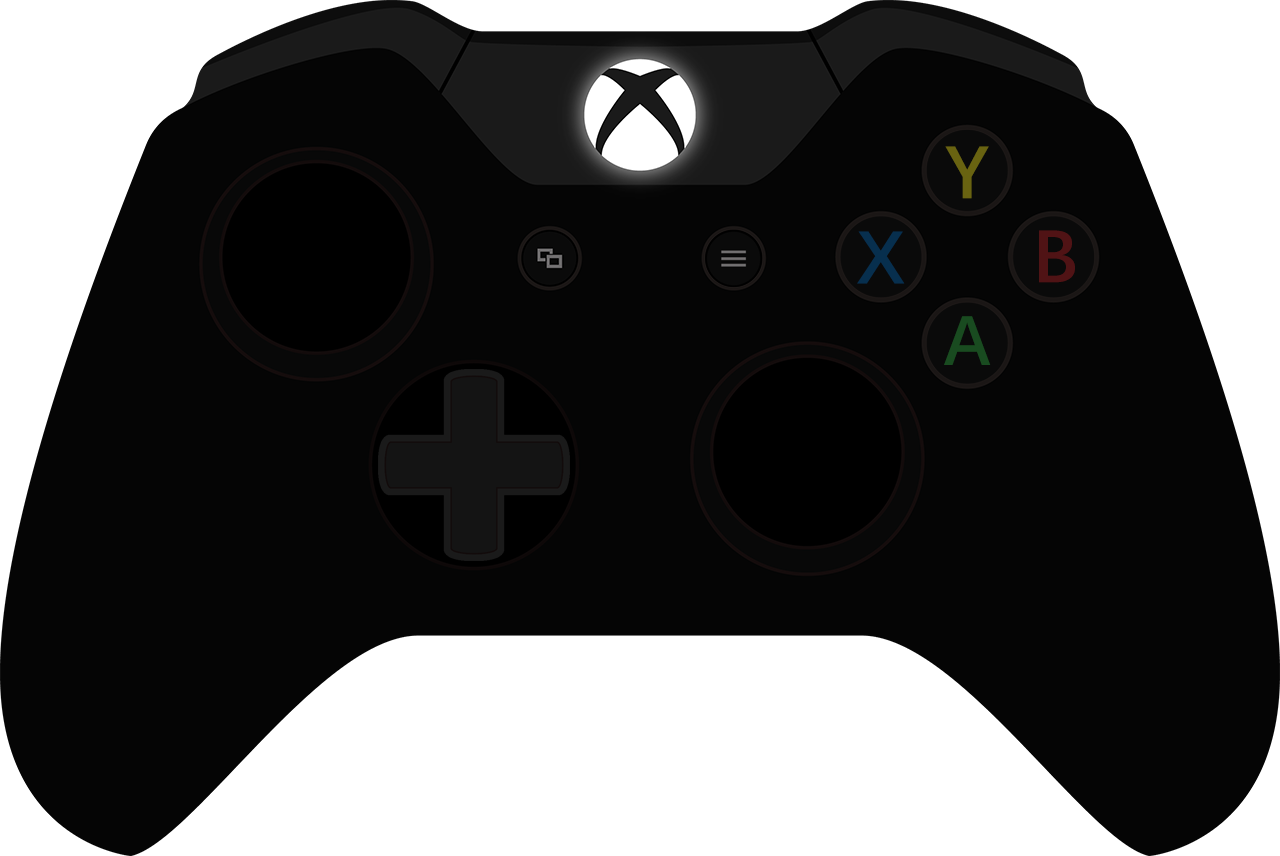
<style>
.page{position:relative;width:1280px;height:856px;background:#050505}
.page>*{position:absolute;margin:0}
.t1{font:75px "DengXian-Bold";color:#696311}
.t2{font:75px "DengXian-Bold";color:#072f4e}
.t3{font:75px "DengXian-Bold";color:#501315}
.t4{font:70.8px "DengXian-Bold";color:#194b20}
</style>
<div class="page">
<p class="t1" style="left:945px;top:146px;width:44px;height:53px">Y</p>
<p class="t2" style="left:857px;top:231px;width:48px;height:53px">X</p>
<p class="t3" style="left:1039px;top:230px;width:36px;height:53px">B</p>
<p class="t4" style="left:944px;top:316px;width:47px;height:49px">A</p>
</div>
